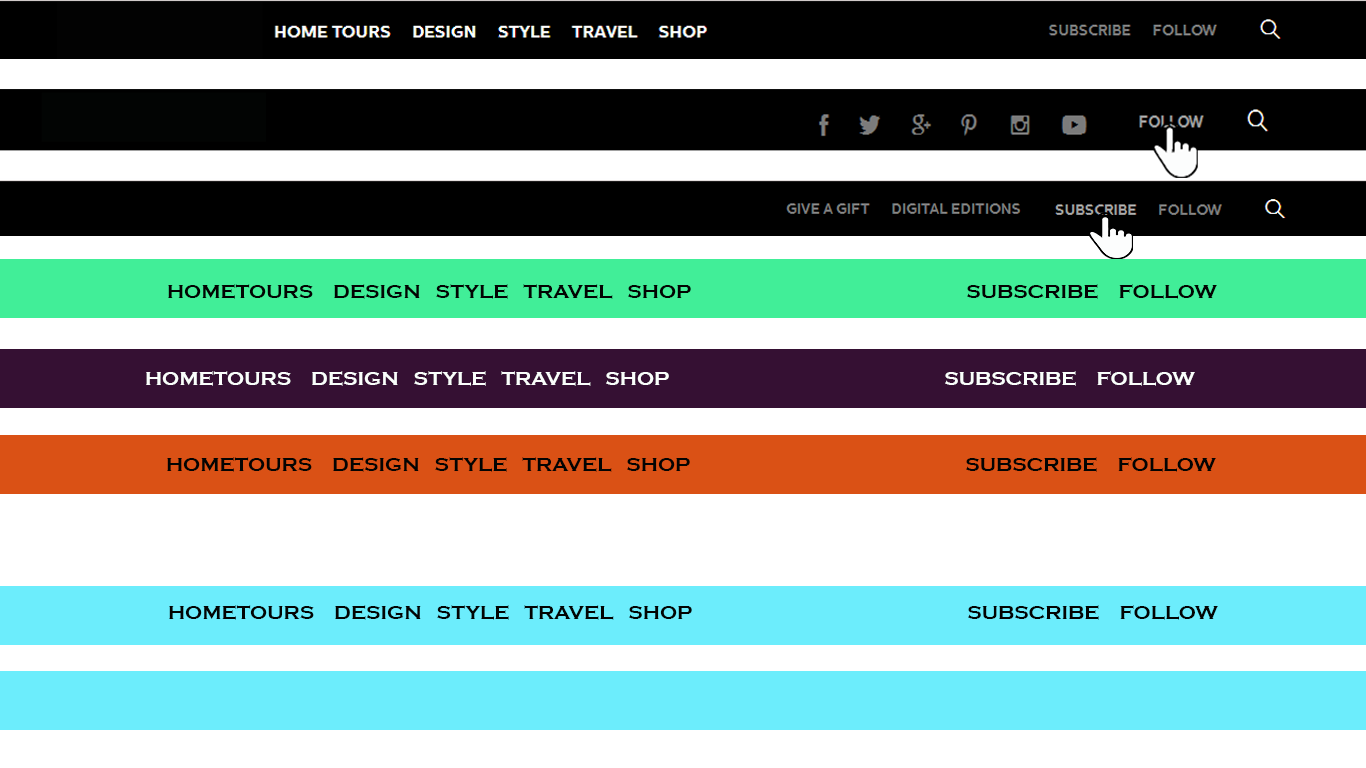
<style>
.page{position:relative;width:1366px;height:768px;background:#ffffff}
.page>*{position:absolute;margin:0}
.t1{font:20px "CopperplateGothic-Bold";color:#030403}
.t2{font:20px "CopperplateGothic-Bold";color:#fafefc}
</style>
<div class="page">
<p class="t1" style="left:168px;top:284px;width:1049px;height:15px">HOMETOURS    DESIGN   STYLE   TRAVEL   SHOP                                                       SUBSCRIBE    FOLLOW</p>
<p class="t2" style="left:146px;top:371px;width:1049px;height:15px">HOMETOURS    DESIGN   STYLE   TRAVEL   SHOP                                                       SUBSCRIBE    FOLLOW</p>
<p class="t1" style="left:167px;top:457px;width:1049px;height:15px">HOMETOURS    DESIGN   STYLE   TRAVEL   SHOP                                                       SUBSCRIBE    FOLLOW</p>
<p class="t1" style="left:169px;top:605px;width:1049px;height:15px">HOMETOURS    DESIGN   STYLE   TRAVEL   SHOP                                                       SUBSCRIBE    FOLLOW</p>
</div>
